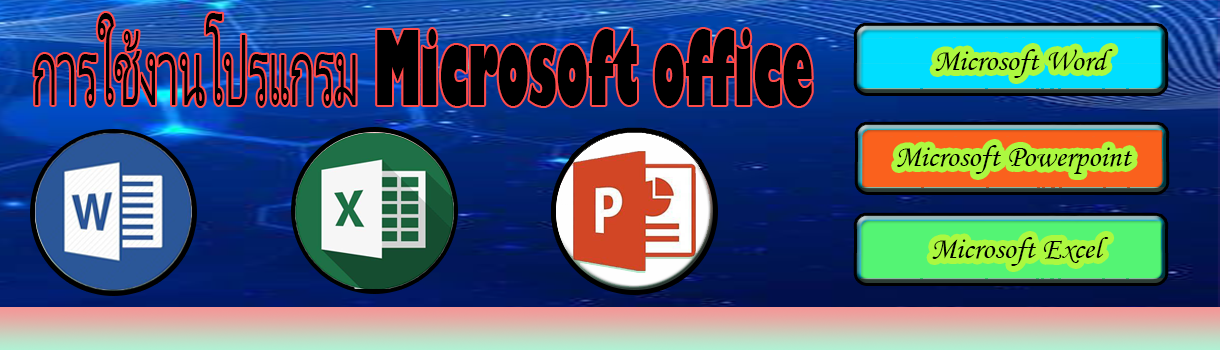
<style>
.page{position:relative;width:1220px;height:350px}
.page>*{position:absolute;margin:0}
.t1{font:100px "LeelawadeeUI";color:#000000;scale:0.45 1}
.t2{font:100px "GillSans-UltraBold";color:#000000;scale:0.45 1}
.t3{font:30px "STLiti";color:#000000}
</style>
<div class="page">
<p class="t1" style="left:34px;top:13px;width:778px;height:93px">การใช้งานโปรแกรม<span class="t2"> Microsoft office</span></p>
<p class="t3" style="left:935px;top:49px;width:178px;height:29px">Microsoft Word</p>
<p class="t3" style="left:897px;top:145px;width:235px;height:29px">Microsoft Powerpoint</p>
<p class="t3" style="left:932px;top:237px;width:177px;height:29px">Microsoft Excel</p>
</div>
